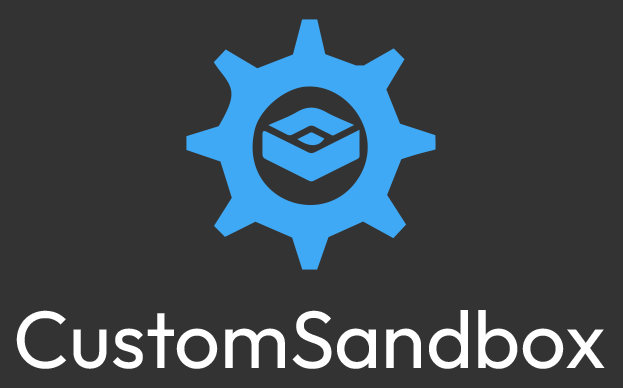
<style>
.page{position:relative;width:623px;height:388px;background:#333333}
.page>*{position:absolute;margin:0}
.t1{font:81.2px "Outfit-Regular";color:#ffffff}
</style>
<div class="page">
<p class="t1" style="left:16px;top:310px;width:589px;height:59px">CustomSandbox</p>
</div>
